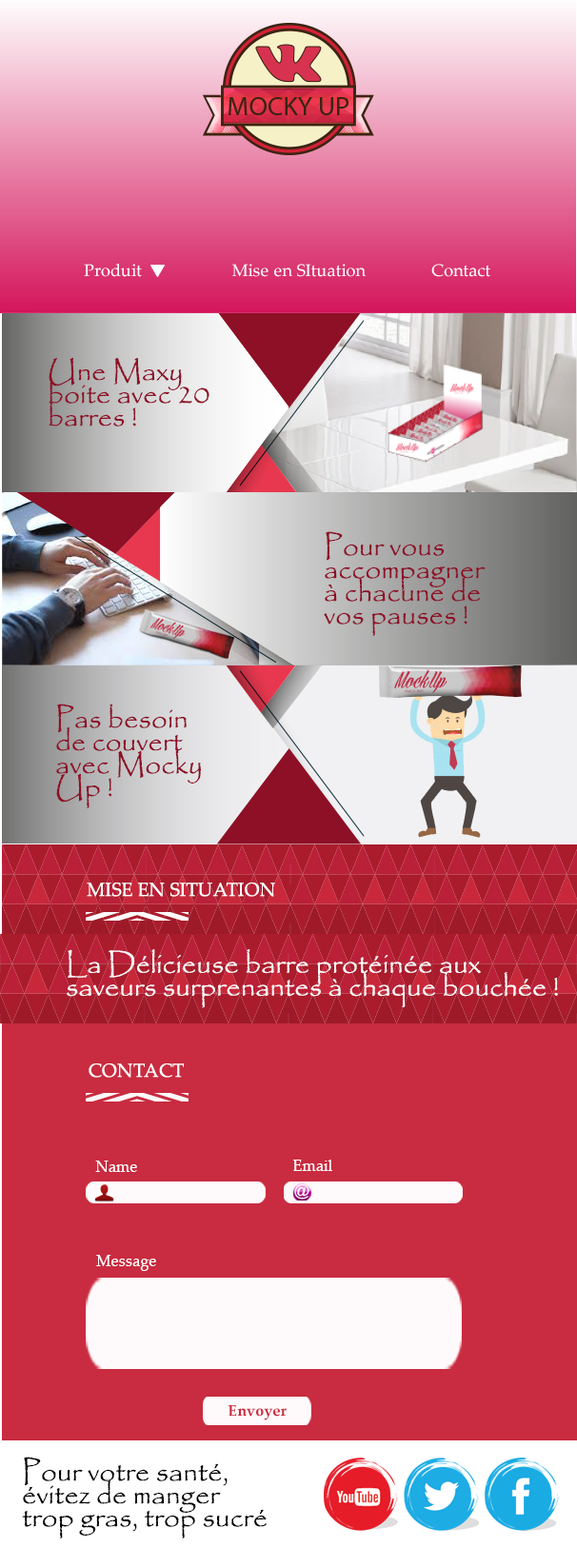
<style>
.page{position:relative;width:577px;height:1568px;background:#c92b40}
.page>*{position:absolute;margin:0}
.t1{font:17.1px "PalatinoLinotype-Roman";color:#fffdfd}
.t2{font:28.6px/22.8px "Papyrus-Regular";color:#8d1026}
.t3{font:19px "PalatinoLinotype-Roman";color:#fffdfd}
.t4{font:28.6px/22.8px "Papyrus-Regular";color:#ffffff}
.t5{font:15.7px "PalatinoLinotype-Roman";color:#fffdfd}
.t6{font:15.3px "PalatinoLinotype-Bold";color:#c92b40}
.t7{font:28.6px/22.8px "Papyrus-Regular";color:#010101}
</style>
<div class="page">
<p class="t1" style="left:84px;top:264px;width:58px;height:13px">Produit</p>
<p class="t1" style="left:232px;top:264px;width:134px;height:13px">Mise en SItuation</p>
<p class="t1" style="left:431px;top:264px;width:59px;height:13px">Contact</p>
<p class="t2" style="left:49px;top:357px;width:160px;height:70px">Une Maxy boite avec 20 barres !</p>
<p class="t2" style="left:324px;top:531px;width:162px;height:105px">Pour vous accompagner à chacune de vos pauses !</p>
<p class="t2" style="left:56px;top:704px;width:145px;height:104px">Pas besoin de couvert avec Mocky Up !</p>
<p class="t3" style="left:87px;top:883px;width:188px;height:14px">MISE EN SITUATION</p>
<p class="t4" style="left:67px;top:949px;width:491px;height:59px">La Délicieuse barre protéinée aux saveurs surprenantes à chaque bouchée !</p>
<p class="t3" style="left:89px;top:1063px;width:96px;height:15px">CONTACT</p>
<p class="t5" style="left:95px;top:1161px;width:42px;height:11px">Name</p>
<p class="t5" style="left:293px;top:1160px;width:39px;height:11px">Email</p>
<p class="t5" style="left:96px;top:1255px;width:60px;height:16px">Message</p>
<p class="t6" style="left:228px;top:1404px;width:59px;height:16px">Envoyer</p>
<p class="t7" style="left:22px;top:1457px;width:245px;height:81px">Pour votre santé, évitez de manger trop gras, trop sucré<br><span class="t2"><br><br>[11:51] <br>à consommer le produit sans modération</span></p>
</div>
